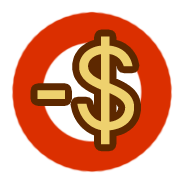
<style>
.page{position:relative;width:185px;height:185px;background:#ffffff}
.page>*{position:absolute;margin:0}
.t1{font:123px "OriyaSangamMN";color:#eed16e}
</style>
<div class="page">
<p class="t1" style="left:37px;top:36px;width:97px;height:109px">-$</p>
</div>
